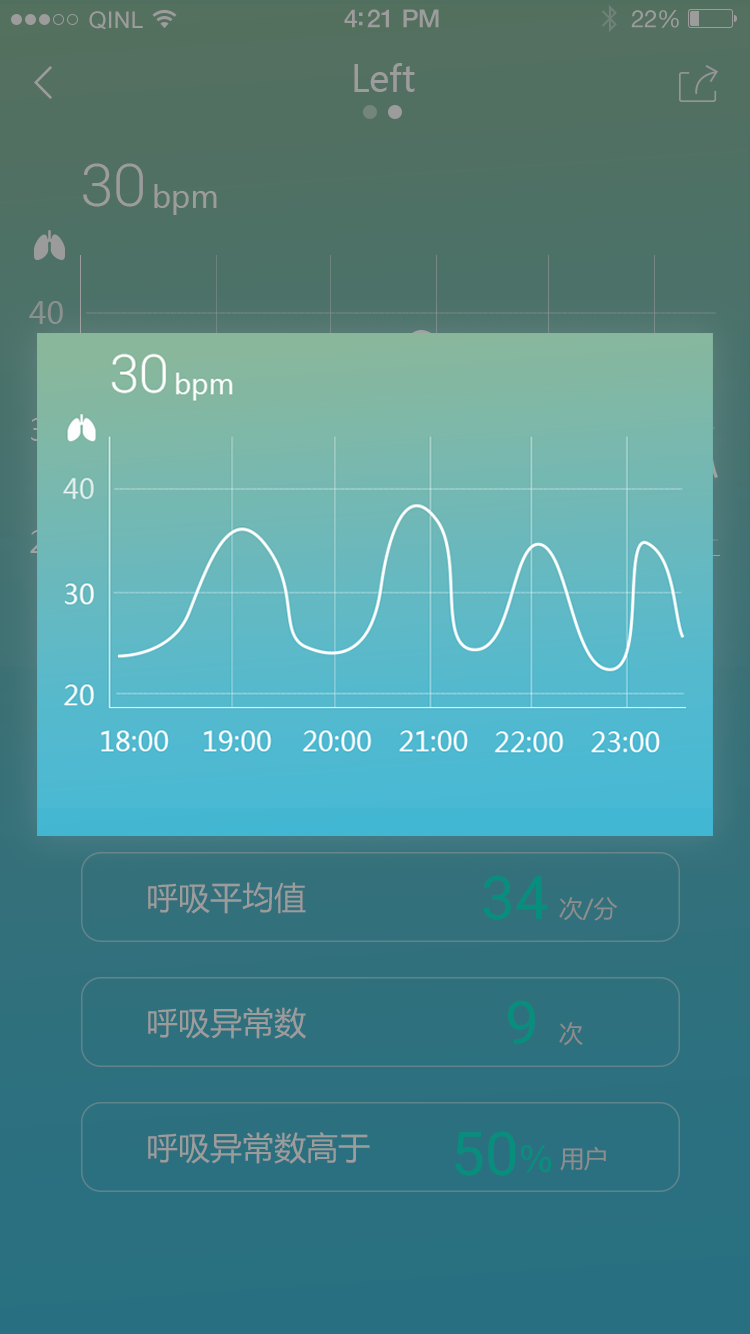
<style>
.page{position:relative;width:750px;height:1334px}
.page>*{position:absolute;margin:0}
.t1{font:23px "ArialUnicodeMS";letter-spacing:0.02em;color:#9c9c9c}
.t2{font:25px "HelveticaNeue-Medium";letter-spacing:-0.02em;color:#9c9c9c}
.t3{font:24px "HelveticaNeue";letter-spacing:-0.02em;color:#9c9c9c}
.t4{font:36px "MicrosoftYaHei";color:#9c9c9c}
.t5{font:60px "Roboto-Light";color:#9c9c9c}
.t6{font:30px "MicrosoftYaHei";color:#9c9c9c}
.t7{font:30px "MicrosoftYaHei";color:#89918f}
.t8{font:30px "MicrosoftYaHei";color:#81b8a4}
.t9{font:30px "MicrosoftYaHei";color:#71b8b6}
.t10{font:60px "Roboto-Regular";color:#078e7d}
.t11{font:32px "MicrosoftYaHei";color:#9c9c9c}
.t12{font:24px "MicrosoftYaHei";color:#8d8d8d}
.t13{font:36px "AdobeHeitiStd-Regular";color:#078e7d}
</style>
<div class="page">
<p class="t1" style="left:89px;top:11px;width:54px;height:19px">QINL</p>
<p class="t2" style="left:344px;top:9px;width:95px;height:19px">4:21 PM</p>
<p class="t3" style="left:631px;top:10px;width:48px;height:18px">22%</p>
<p class="t4" style="left:354px;top:63px;width:61px;height:29px">Left</p>
<p class="t5" style="left:83px;top:163px;width:60px;height:44px">30</p>
<p class="t6" style="left:154px;top:184px;width:63px;height:31px">bpm</p>
<p class="t7" style="left:29px;top:301px;width:34px;height:23px">40</p>
<p class="t8" style="left:31px;top:418px;width:32px;height:23px">30</p>
<p class="t9" style="left:30px;top:530px;width:33px;height:23px">20</p>
<p class="t10" style="left:483px;top:875px;width:65px;height:45px">34</p>
<p class="t11" style="left:148px;top:882px;width:158px;height:32px">呼吸平均值</p>
<p class="t12" style="left:559px;top:897px;width:59px;height:24px">次/分</p>
<p class="t10" style="left:508px;top:1000px;width:27px;height:44px">9</p>
<p class="t11" style="left:148px;top:1007px;width:158px;height:32px">呼吸异常数</p>
<p class="t12" style="left:559px;top:1022px;width:24px;height:24px">次</p>
<p class="t11" style="left:148px;top:1132px;width:222px;height:32px">呼吸异常数高于</p>
<p class="t10" style="left:455px;top:1131px;width:61px;height:45px">50</p>
<p class="t13" style="left:521px;top:1145px;width:31px;height:28px">％</p>
<p class="t12" style="left:560px;top:1146px;width:46px;height:25px">用户</p>
</div>
